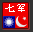
<style>
.page{position:relative;width:33px;height:32px;background:#f20000}
.page>*{position:absolute;margin:0}
.t1{font:10.4px "SimSun";color:#ffffff}
</style>
<div class="page">
<p class="t1" style="left:5px;top:4px;width:20px;height:8px">七军</p>
</div>
